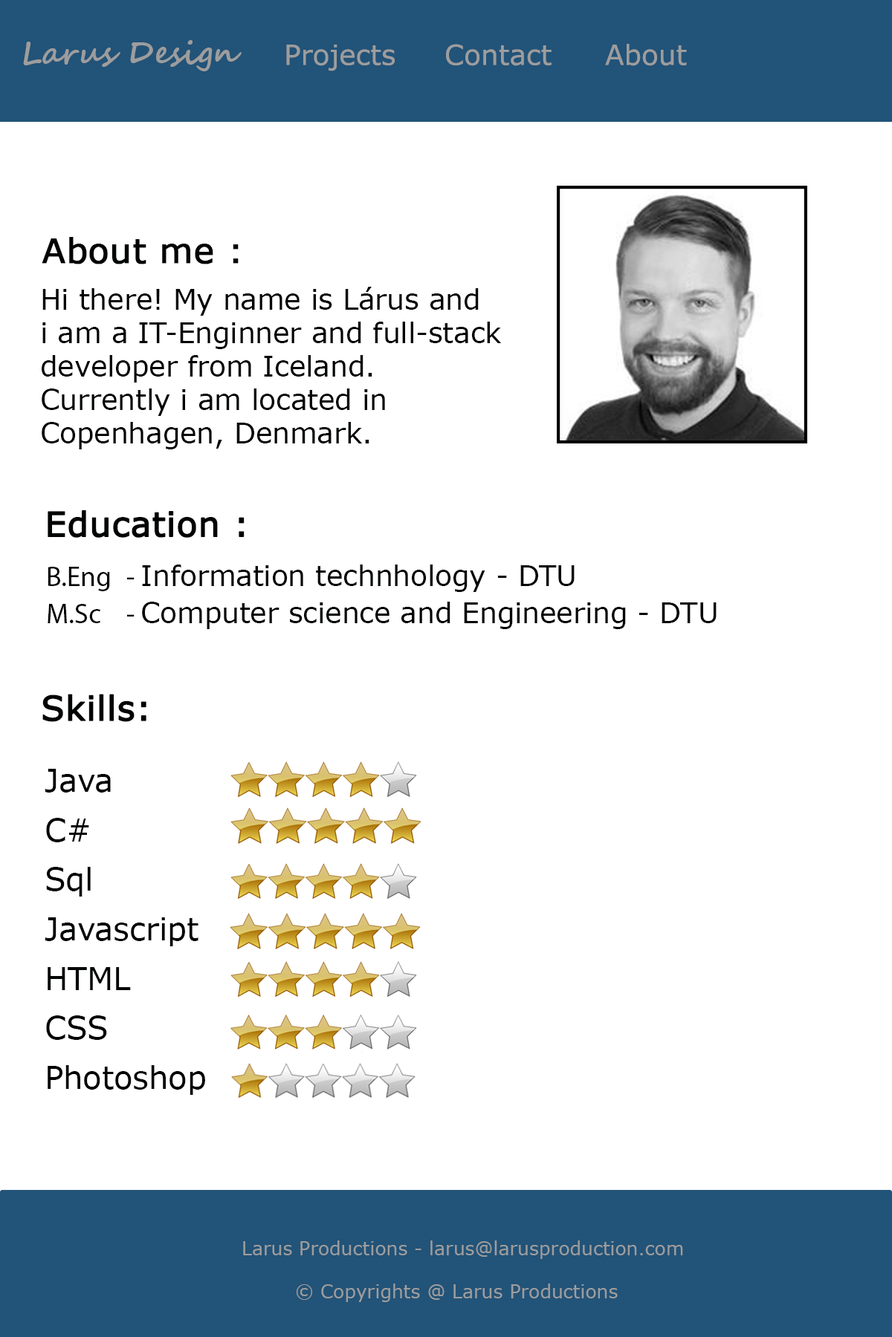
<style>
.page{position:relative;width:892px;height:1337px;background:#ffffff}
.page>*{position:absolute;margin:0}
.t1{font:31px "SegoeScript-Bold";color:#9d9d9d}
.t2{font:27.9px "MSReferenceSansSerif";color:#9d9d9d}
.t3{font:34.1px "MSReferenceSansSerif";color:#020303;font-weight:bold}
.t4{font:27.9px "MSReferenceSansSerif";color:#020303}
.t5{font:27.9px "MyriadPro-Regular";color:#020303}
.t6{font:31px/49.5px "MSReferenceSansSerif";color:#020303}
.t7{font:18.6px "MSReferenceSansSerif";color:#9d9d9d}
</style>
<div class="page">
<p class="t1" style="left:23px;top:40px;width:218px;height:31px">Larus Design</p>
<p class="t2" style="left:286px;top:44px;width:401px;height:27px">Projects  Contact    About</p>
<p class="t3" style="left:42px;top:237px;width:197px;height:28px">About me :</p>
<p class="t4" style="left:42px;top:287px;width:460px;height:163px">Hi there! My name is Lárus and<br>i am a IT-Enginner and full-stack <br>developer from Iceland.<br>Currently i am located in <br>Copenhagen, Denmark.</p>
<p class="t3" style="left:48px;top:510px;width:196px;height:28px">Education :</p>
<p class="t4" style="left:48px;top:565px;width:668px;height:64px"><span class="t5">B.Eng  - </span>Information technhology - DTU <br><span class="t5">M.Sc  - </span>Computer science and Engineering - DTU</p>
<p class="t3" style="left:42px;top:694px;width:104px;height:28px">Skills:</p>
<p class="t6" style="left:45px;top:769px;width:160px;height:326px">Java <br>C#  <br>Sql<br>Javascript<br>HTML<br>CSS<br>Photoshop</p>
<p class="t7" style="left:243px;top:1241px;width:440px;height:18px">Larus Productions - larus@larusproduction.com</p>
<p class="t7" style="left:296px;top:1284px;width:321px;height:18px">© Copyrights @ Larus Productions</p>
</div>
